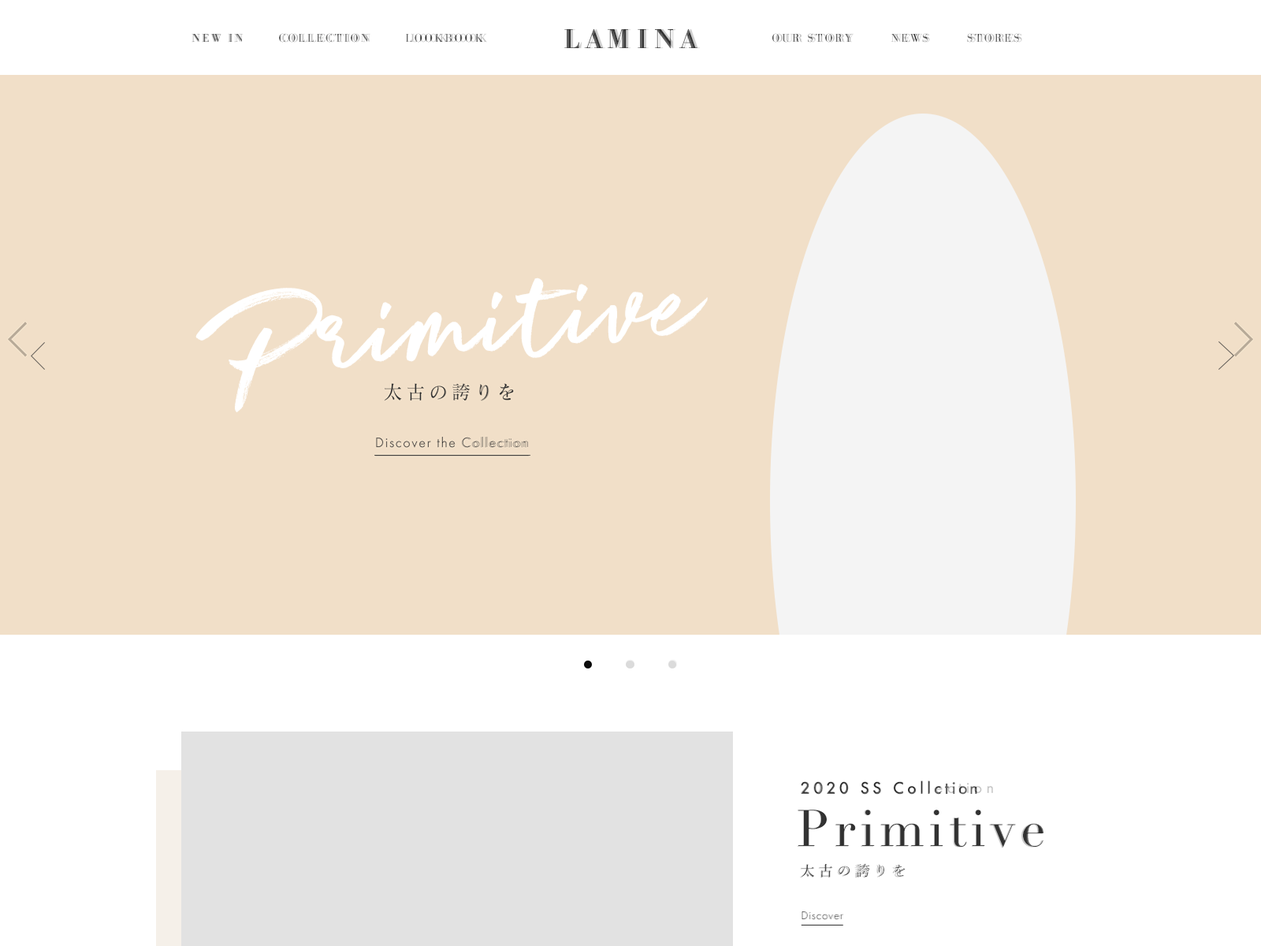
<style>
.page{position:relative;width:1261px;height:946px;background:#f1dfc8}
.page>*{position:absolute;margin:0}
.t1{font:28.4px "BodoniURW-Med";letter-spacing:0.2em}
.t2{font:11.8px "BodoniURW-Reg";letter-spacing:0.2em;color:#5e5e5e}
.t3{font:11.8px "BodoniURW-Reg";letter-spacing:0.2em;color:#646464}
.t4{font:11.8px "BodoniURW-Reg";letter-spacing:0.2em}
.t5{font:146.6px "SuperFlyOne";letter-spacing:0.025em;color:#ffffff}
.t6{font:18.9px "MatisseProN-M";letter-spacing:0.2em;color:#333333}
.t7{font:14.2px "FuturaPT-Light";letter-spacing:0.1em;color:#333333}
.t8{font:15.8px "Futura-Medium";letter-spacing:0.2em}
.t9{font:50.4px "Didot";letter-spacing:0.1em;color:#333333}
.t10{font:14.2px "YuMin-Medium";letter-spacing:0.3em;color:#535353}
.t11{font:11.8px "FuturaPT-Light";letter-spacing:0.05em}
</style>
<div class="page">
<p class="t1" style="left:564px;top:29px;width:133px;height:20px">LAMINA</p>
<p class="t2" style="left:192px;top:34px;width:52px;height:9px">NEW IN</p>
<p class="t3" style="left:279px;top:33px;width:90px;height:10px">COLLECTION</p>
<p class="t4" style="left:405px;top:33px;width:78px;height:10px">LOOKBOOK</p>
<p class="t3" style="left:772px;top:33px;width:80px;height:10px">OUR STORY</p>
<p class="t3" style="left:891px;top:33px;width:37px;height:10px">NEWS</p>
<p class="t3" style="left:967px;top:33px;width:52px;height:10px">STORES</p>
<p class="t5" style="left:195px;top:277px;width:513px;height:135px;rotate:-5deg">Primitive</p>
<p class="t6" style="left:384px;top:383px;width:130px;height:17px">太古の誇りを</p>
<p class="t7" style="left:376px;top:437px;width:152px;height:11px">Discover the Collection</p>
<p class="t8" style="left:801px;top:780px;width:176px;height:14px">2020 SS Collction</p>
<p class="t9" style="left:798px;top:809px;width:245px;height:38px">Primitive</p>
<p class="t10" style="left:801px;top:863px;width:104px;height:14px">太古の誇りを</p>
<p class="t11" style="left:801px;top:911px;width:42px;height:9px">Discover</p>
</div>
